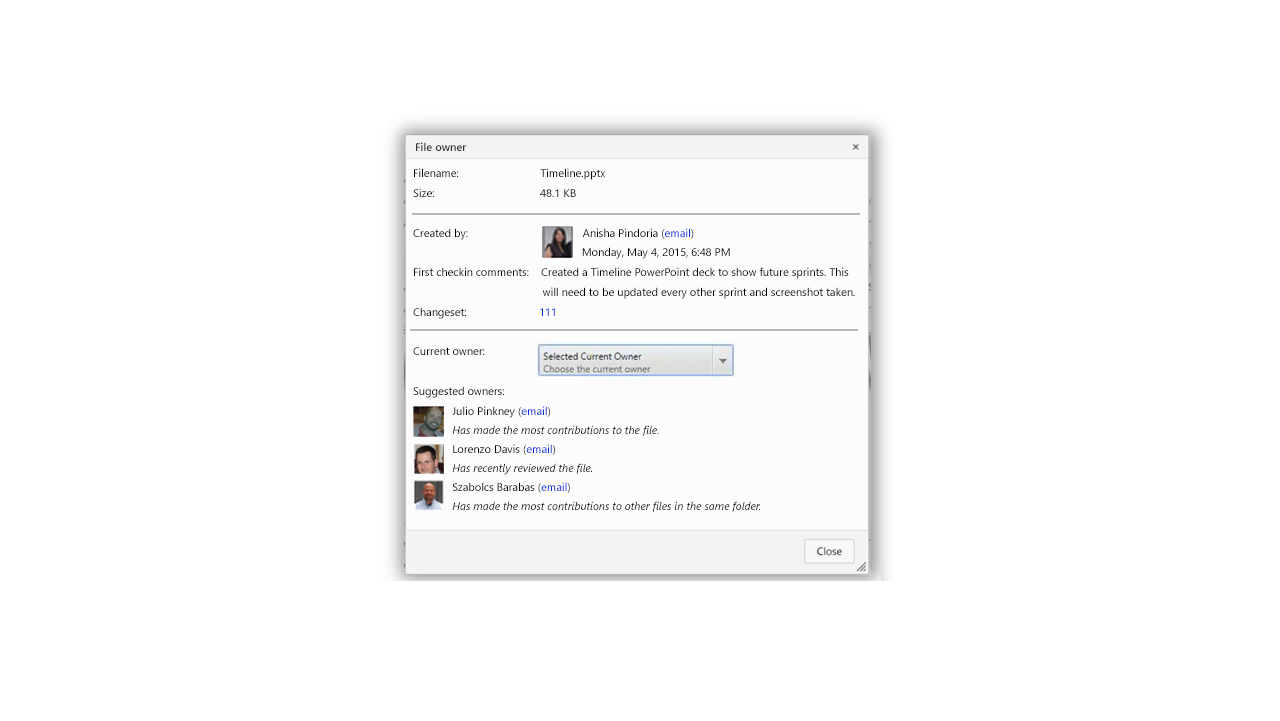
<style>
.page{position:relative;width:1280px;height:721px;background:#ffffff}
.page>*{position:absolute;margin:0}
.t1{font:11px "SegoeUI-Semibold";color:#333333}
.t2{font:11px/20px "SegoeUI";color:#000000}
.t3{font:11px/19px "SegoeUI";color:#000000}
.t4{font:11px/19px "SegoeUI";color:#032bd9}
.t5{font:11px/19px "SegoeUI-Italic";color:#000000}
</style>
<div class="page">
<p class="t1" style="left:416px;top:142px;width:51px;height:9px">File owner</p>
<p class="t2" style="left:413px;top:168px;width:442px;height:344px">Filename:                           Timeline.pptx<br>Size:                                   48.1 KB<br><br>Created by:                                      <span class="t3">Anisha Pindoria (</span><span class="t4">email</span><span class="t3">)<br>                                                        Monday, May 4, 2015, 6:48 PM<br></span>First checkin comments:    Created a Timeline PowerPoint deck to show future sprints. This<br>                                           will need to be updated every other sprint and screenshot taken.<br>Changeset:                        <span class="t4">111<br><br></span>Current owner:<br><br>Suggested owners:<br>             <span class="t3">Julio Pinkney (</span><span class="t4">email</span><span class="t3">)<br>             </span><span class="t5">Has made the most contributions to the file.<br></span><span class="t3">             Lorenzo Davis (</span><span class="t4">email</span><span class="t3">)<br>             </span><span class="t5">Has recently reviewed the file.<br></span><span class="t3">             Szabolcs Barabas (</span><span class="t4">email</span><span class="t3">)<br>             </span><span class="t5">Has made the most contributions to other files in the same folder.</span></p>
</div>
